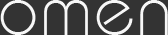
<style>
.page{position:relative;width:168px;height:35px;background:#333333}
.page>*{position:absolute;margin:0}
.t1{font:72px "Brie-Light";letter-spacing:0.025em;color:#f7f7f7}
</style>
<div class="page">
<p class="t1" style="left:0px;top:0px;width:168px;height:35px">omen</p>
</div>
